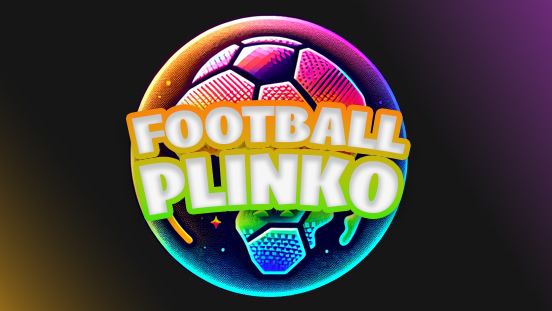
<style>
.page{position:relative;width:552px;height:311px;background:#161616}
.page>*{position:absolute;margin:0}
.t1{font:54.7px/62px "Skia_2.696wght_0.679wdth";color:#e4e4e4;scale:1.08 1}
.t2{font:76px/62px "Skia_2.696wght_0.679wdth";color:#e4e4e4;scale:1.08 1}
</style>
<div class="page">
<p class="t1" style="left:131px;top:106px;width:274px;height:110px;text-align:center">FOOTBALL<br><span class="t2">PLINKO</span></p>
</div>
